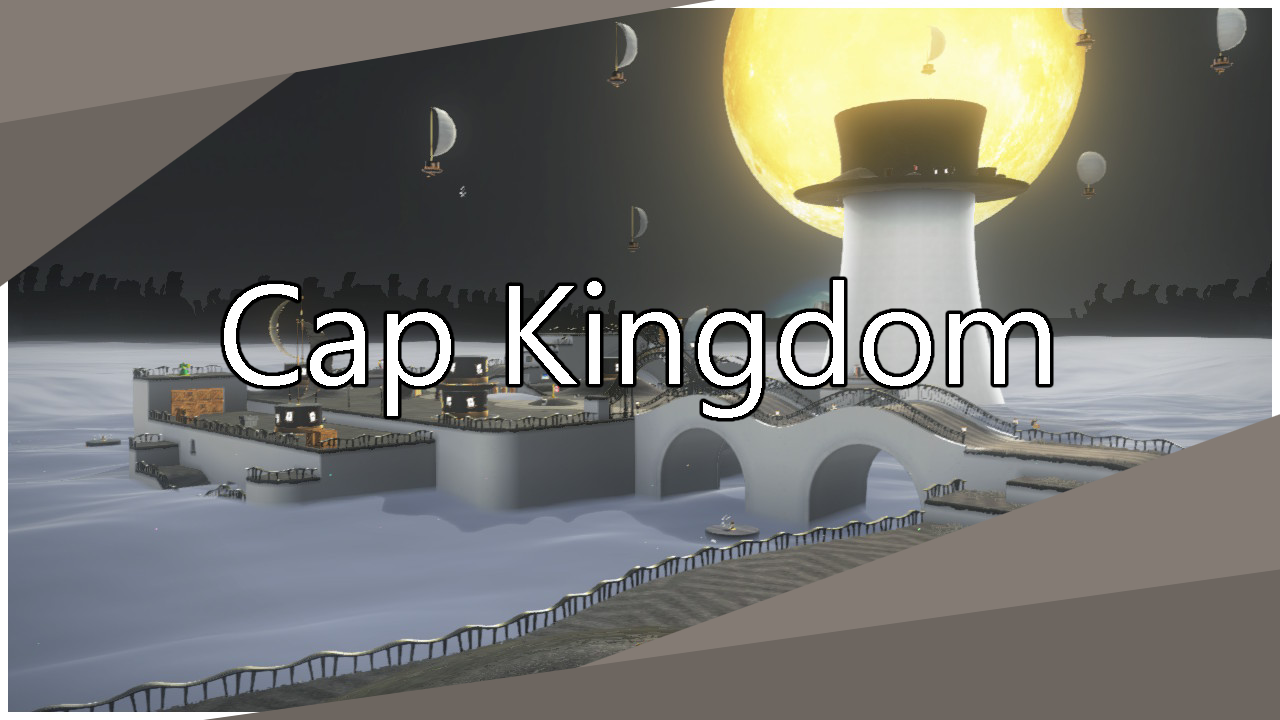
<style>
.page{position:relative;width:1280px;height:720px}
.page>*{position:absolute;margin:0}
.t1{font:140px "SegoeUI";color:#ffffff}
</style>
<div class="page">
<p class="t1" style="left:224px;top:280px;width:826px;height:138px">Cap Kingdom</p>
</div>
